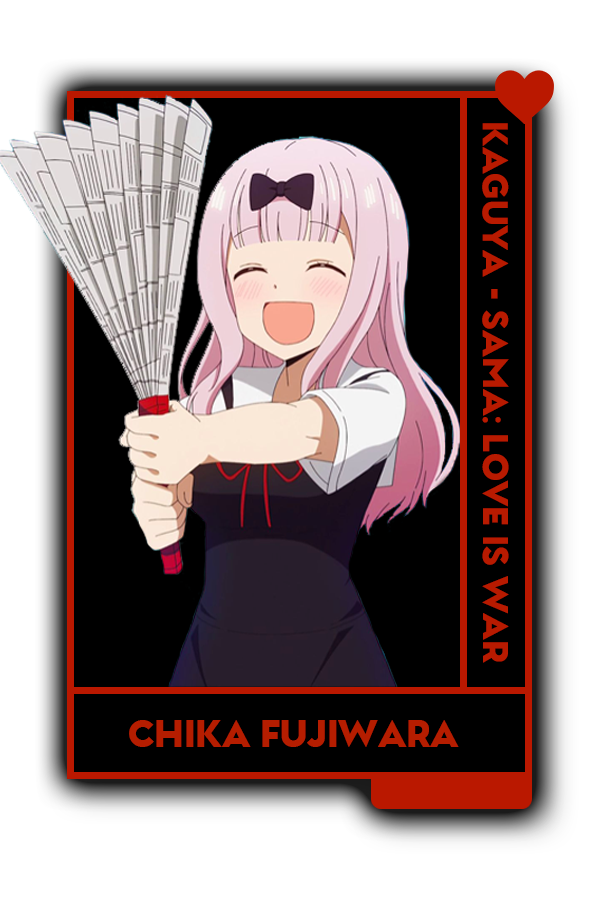
<style>
.page{position:relative;width:600px;height:900px;background:#000000}
.page>*{position:absolute;margin:0}
.t1{font:34px "GarnetCapitalsBlack-Regular";color:#b52616}
.t2{font:35.7px "GarnetCapitalsBlack-Regular";color:#b22818}
</style>
<div class="page">
<p class="t1" style="left:482px;top:123px;width:27px;height:540px;rotate:90deg">Kaguya - Sama: Love is war</p>
<p class="t2" style="left:129px;top:720px;width:330px;height:27px">CHIKA FUJIWARA</p>
</div>
